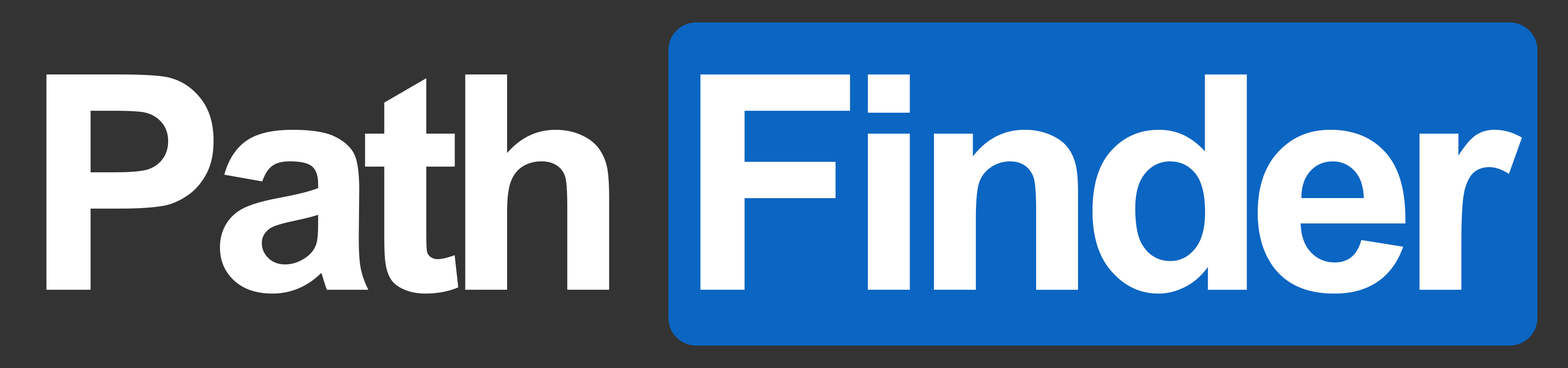
<style>
.page{position:relative;width:1568px;height:368px;background:#333333}
.page>*{position:absolute;margin:0}
.t1{font:300.6px "Arial-BoldMT";letter-spacing:-0.06em;color:#ffffff}
</style>
<div class="page">
<p class="t1" style="left:46px;top:74px;width:1476px;height:220px">Path Finder</p>
</div>
